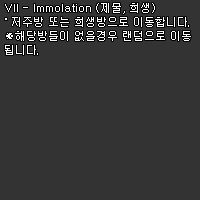
<style>
.page{position:relative;width:200px;height:200px;background:#333333}
.page>*{position:absolute;margin:0}
.t1{font:11px/14px "Dotum";color:#ffffff}
</style>
<div class="page">
<p class="t1" style="left:5px;top:3px;width:186px;height:52px">VII - Immolation (제물, 희생)<br>˚ 저주방 또는 희생방으로 이동합니다.<br>※해당방들이 없을경우 랜덤으로 이동<br>됩니다.</p>
</div>
